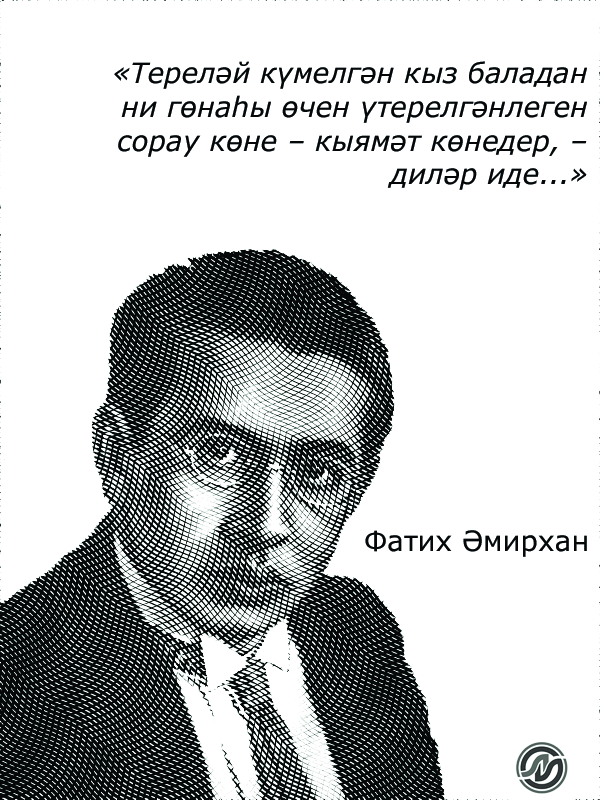
<style>
.page{position:relative;width:600px;height:800px;background:#ffffff}
.page>*{position:absolute;margin:0}
.t1{font:28px "Verdana-Italic";color:#050708}
.t2{font:28px "Verdana";color:#050708}
</style>
<div class="page">
<p class="t1" style="left:114px;top:61px;width:473px;height:129px;text-align:right">«Тереләй күмелгән кыз баладан ни гөнаһы өчен үтерелгәнлеген сорау көне – кыямәт көнедер, – диләр иде...»</p>
<p class="t2" style="left:365px;top:530px;width:222px;height:27px">Фатих Әмирхан</p>
</div>
